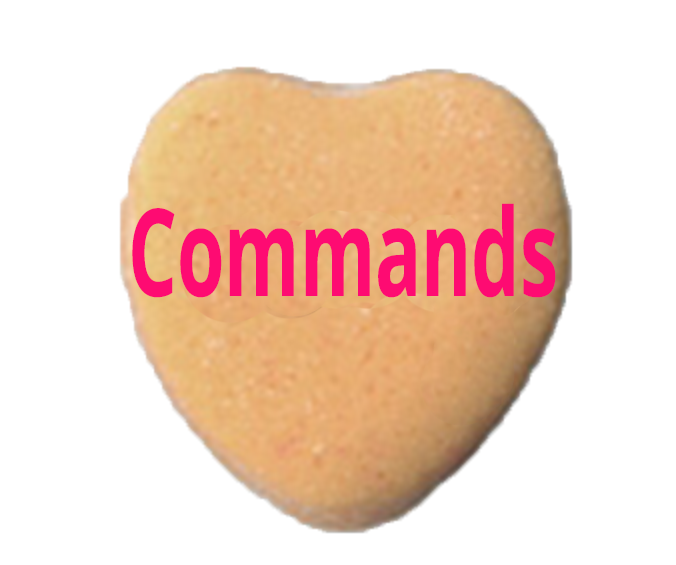
<style>
.page{position:relative;width:676px;height:565px;background:#ffffff}
.page>*{position:absolute;margin:0}
.t1{font:121.2px "OpenSans-Bold";color:#fe0b72;scale:0.63 1}
</style>
<div class="page">
<p class="t1" style="left:132px;top:203px;width:424px;height:95px">Commands</p>
</div>
